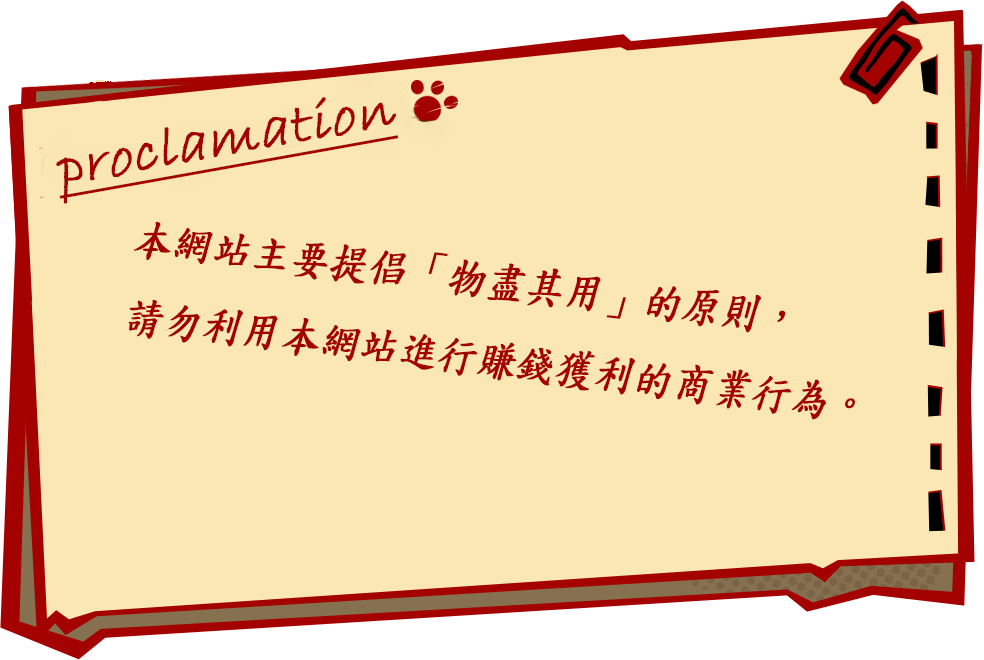
<style>
.page{position:relative;width:984px;height:660px;background:#fae7b3}
.page>*{position:absolute;margin:0}
.t1{font:58.1px "BradleyHandITC";color:#a40101;font-weight:bold;font-style:italic;text-decoration:underline}
.t2{font:48.4px "AdobeFanHeitiStd-Bold";color:#a40101;font-weight:bold}
.t3{font:44.4px "DFKaiShu-SB-Estd-BF";color:#a40101;font-weight:bold;font-style:italic;scale:0.86 1}
</style>
<div class="page">
<p class="t1" style="left:56px;top:97px;width:343px;height:107px;rotate:-10deg"><span class="t2"><br></span>proclamation</p>
<p class="t3" style="left:128px;top:222px;width:727px;height:198px;rotate:7deg">本網站主要提倡「物盡其用」的原則，<br>請勿利用本網站進行賺錢獲利的商業行為。</p>
</div>
